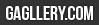
<style>
.page{position:relative;width:99px;height:25px;background:#333333}
.page>*{position:absolute;margin:0}
.t1{font:20px "BebasNeue";color:#ffffff}
</style>
<div class="page">
<p class="t1" style="left:6px;top:6px;width:87px;height:14px">gagllery.com</p>
</div>
